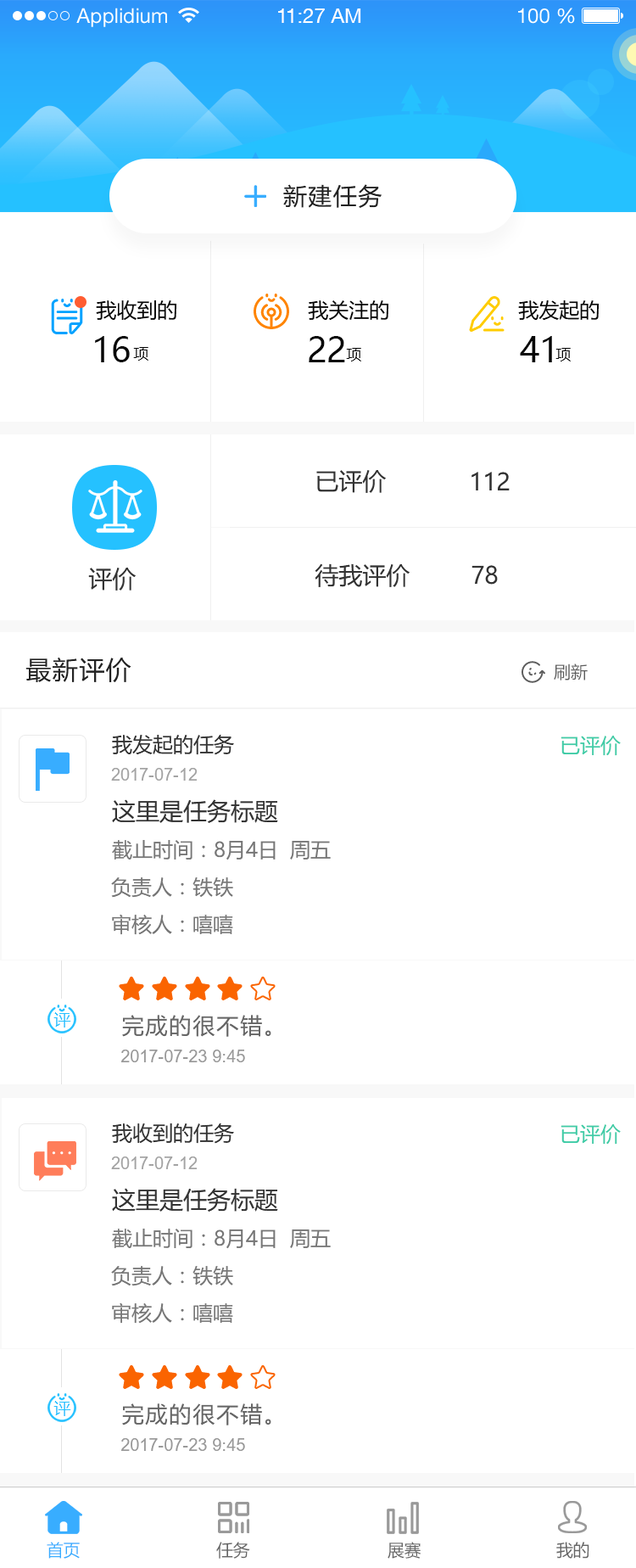
<style>
.page{position:relative;width:636px;height:1568px;background:#ffffff}
.page>*{position:absolute;margin:0}
.t1{font:20.4px "HelveticaNeueLTStd-Roman";color:#ffffff}
.t2{font:20.4px "HelveticaNeueCE-Roman";color:#ffffff}
.t3{font:23.8px "MicrosoftYaHei";letter-spacing:0.05em;color:#222222}
.t4{font:20.4px "MicrosoftYaHei";color:#070707}
.t5{font:33.9px "MicrosoftYaHei";letter-spacing:-0.025em;color:#070707}
.t6{font:15.3px "MicrosoftYaHei";letter-spacing:0.1em;color:#070707}
.t7{font:23.8px "MicrosoftYaHei";color:#333333}
.t8{font:25.5px "MicrosoftYaHei";letter-spacing:0.05em;color:#222222}
.t9{font:17px "MicrosoftYaHei";color:#5d5d5d}
.t10{font:20.4px "MicrosoftYaHei";color:#333333}
.t11{font:20.4px "MicrosoftYaHei";color:#3fcca7}
.t12{font:17px "ArialMT";color:#a3a3a3}
.t13{font:20.4px "MicrosoftYaHei";color:#777777}
.t14{font:17px "MicrosoftYaHei";letter-spacing:0.075em;color:#25c1ff}
.t15{font:22.1px "MicrosoftYaHei";letter-spacing:0.075em;color:#666666}
.t16{font:17px "ArialMT";color:#999999}
.t17{font:17px "MicrosoftYaHei";color:#38adff;text-transform:uppercase}
.t18{font:17px "MicrosoftYaHei";color:#666666;text-transform:uppercase}
</style>
<div class="page">
<p class="t1" style="left:76px;top:8px;width:91px;height:19px">Applidium</p>
<p class="t2" style="left:278px;top:8px;width:83px;height:15px">11:27 AM</p>
<p class="t1" style="left:518px;top:8px;width:57px;height:16px">100 %</p>
<p class="t3" style="left:283px;top:184px;width:100px;height:24px">新建任务</p>
<p class="t4" style="left:96px;top:300px;width:80px;height:20px">我收到的</p>
<p class="t4" style="left:308px;top:300px;width:81px;height:20px">我关注的</p>
<p class="t4" style="left:518px;top:300px;width:81px;height:21px">我发起的</p>
<p class="t5" style="left:95px;top:336px;width:35px;height:26px">16</p>
<p class="t5" style="left:309px;top:336px;width:36px;height:26px">22</p>
<p class="t5" style="left:520px;top:336px;width:32px;height:26px">41</p>
<p class="t6" style="left:133px;top:347px;width:15px;height:14px">项</p>
<p class="t6" style="left:346px;top:348px;width:15px;height:13px">项</p>
<p class="t6" style="left:556px;top:348px;width:15px;height:13px">项</p>
<p class="t7" style="left:316px;top:470px;width:70px;height:23px">已评价</p>
<p class="t7" style="left:472px;top:472px;width:38px;height:18px">112</p>
<p class="t7" style="left:88px;top:568px;width:48px;height:23px">评价</p>
<p class="t7" style="left:315px;top:563px;width:95px;height:24px">待我评价</p>
<p class="t7" style="left:472px;top:565px;width:26px;height:20px">78</p>
<p class="t8" style="left:25px;top:658px;width:107px;height:24px">最新评价</p>
<p class="t9" style="left:554px;top:664px;width:34px;height:16px">刷新</p>
<p class="t10" style="left:112px;top:734px;width:122px;height:21px">我发起的任务</p>
<p class="t11" style="left:561px;top:736px;width:60px;height:20px">已评价</p>
<p class="t12" style="left:111px;top:768px;width:86px;height:13px">2017-07-12</p>
<p class="t7" style="left:112px;top:799px;width:166px;height:24px">这里是任务标题</p>
<p class="t13" style="left:112px;top:840px;width:219px;height:20px">截止时间：8月4日  周五</p>
<p class="t13" style="left:111px;top:877px;width:122px;height:21px">负责人：铁铁</p>
<p class="t13" style="left:112px;top:914px;width:121px;height:21px">审核人：嘻嘻</p>
<p class="t14" style="left:53px;top:1012px;width:18px;height:16px">评</p>
<p class="t15" style="left:122px;top:1015px;width:150px;height:22px">完成的很不错。</p>
<p class="t16" style="left:121px;top:1050px;width:124px;height:12px">2017-07-23 9:45</p>
<p class="t10" style="left:112px;top:1123px;width:122px;height:21px">我收到的任务</p>
<p class="t11" style="left:561px;top:1124px;width:60px;height:21px">已评价</p>
<p class="t12" style="left:111px;top:1156px;width:86px;height:13px">2017-07-12</p>
<p class="t7" style="left:112px;top:1188px;width:166px;height:24px">这里是任务标题</p>
<p class="t13" style="left:112px;top:1229px;width:219px;height:20px">截止时间：8月4日  周五</p>
<p class="t13" style="left:111px;top:1266px;width:122px;height:20px">负责人：铁铁</p>
<p class="t13" style="left:112px;top:1302px;width:121px;height:22px">审核人：嘻嘻</p>
<p class="t14" style="left:53px;top:1401px;width:18px;height:15px">评</p>
<p class="t15" style="left:122px;top:1403px;width:150px;height:22px">完成的很不错。</p>
<p class="t16" style="left:121px;top:1438px;width:124px;height:13px">2017-07-23 9:45</p>
<p class="t17" style="left:47px;top:1542px;width:33px;height:17px">首页</p>
<p class="t18" style="left:216px;top:1542px;width:34px;height:17px">任务</p>
<p class="t18" style="left:388px;top:1542px;width:34px;height:17px">展赛</p>
<p class="t18" style="left:557px;top:1542px;width:33px;height:17px">我的</p>
</div>
